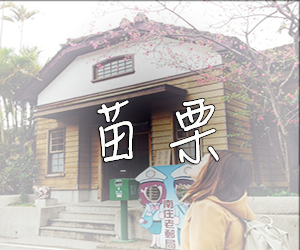
<style>
.page{position:relative;width:300px;height:250px}
.page>*{position:absolute;margin:0}
.t1{font:79px "DFHsiu-W3-WIN-BF";color:#fcfbfa}
</style>
<div class="page">
<p class="t1" style="left:97px;top:98px;width:122px;height:66px">苗栗</p>
</div>
